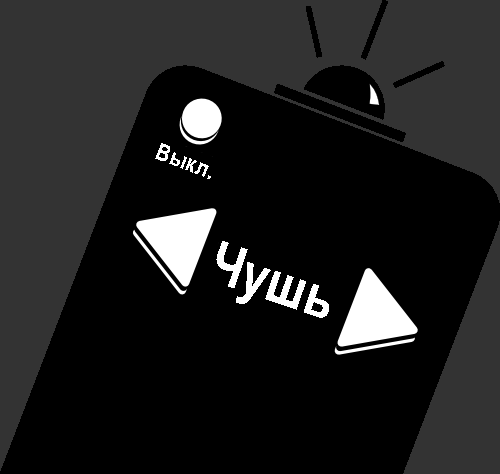
<style>
.page{position:relative;width:500px;height:474px;background:#000000}
.page>*{position:absolute;margin:0}
.t1{font:24px "ArialNarrow-Bold";color:#ffffff}
.t2{font:58px "ArialNarrow-Bold";color:#ffffff}
</style>
<div class="page">
<p class="t1" style="left:155px;top:143px;width:56px;height:36px;rotate:21deg">Выкл.</p>
<p class="t2" style="left:216px;top:241px;width:113px;height:77px;rotate:19deg">Чушь</p>
</div>
